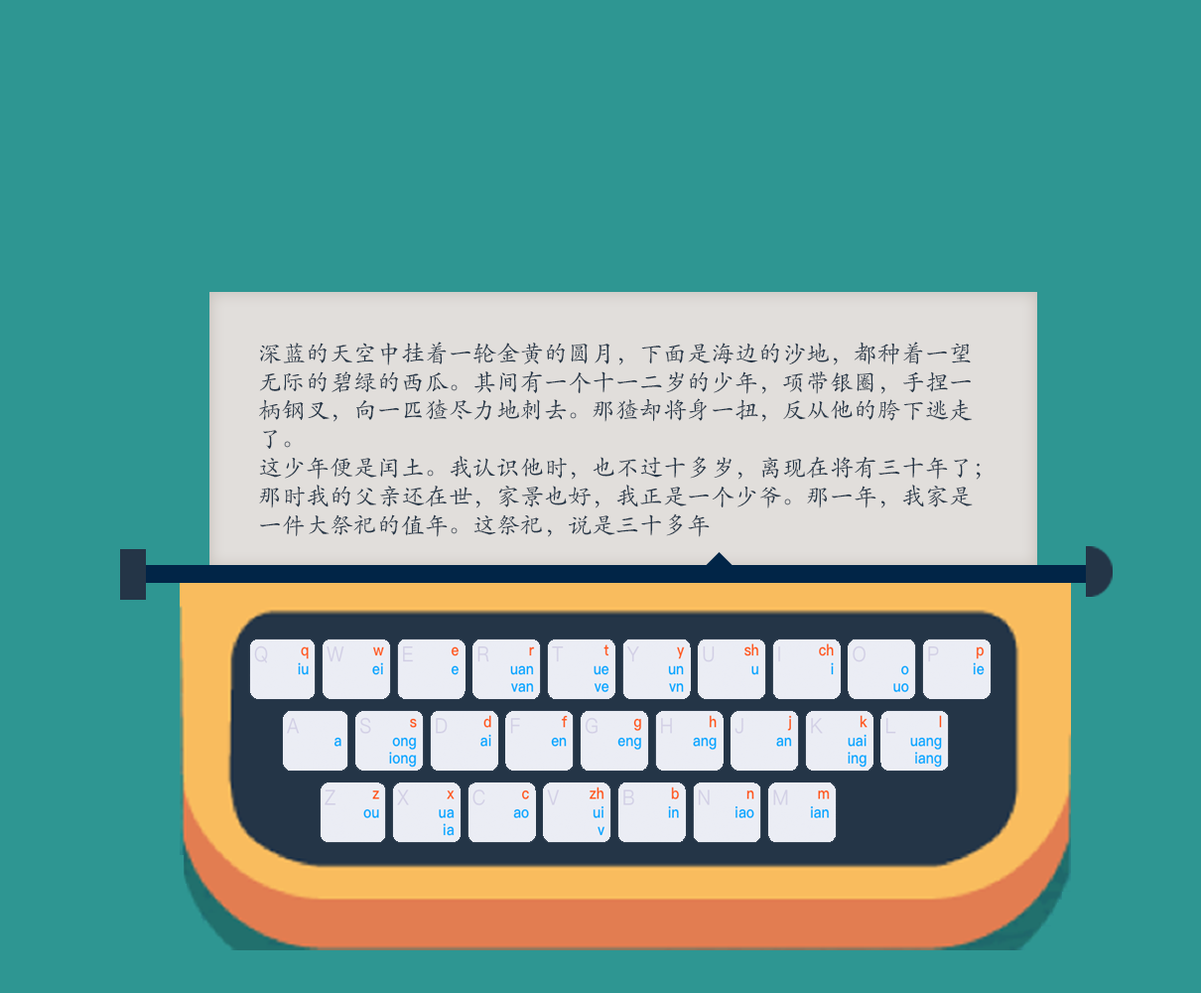
<style>
.page{position:relative;width:1201px;height:993px;background:#2e9692}
.page>*{position:absolute;margin:0}
.t1{font:23.8px "STKaitiSC-Regular";color:#243547}
</style>
<div class="page">
<p class="t1" style="left:259px;top:341px;width:722px;height:196px">深蓝的天空中挂着一轮金黄的圆月，下面是海边的沙地，都种着一望<br>无际的碧绿的西瓜。其间有一个十一二岁的少年，项带银圈，手捏一<br>柄钢叉，向一匹猹尽力地刺去。那猹却将身一扭，反从他的胯下逃走<br>了。<br>这少年便是闰土。我认识他时，也不过十多岁，离现在将有三十年了；<br>那时我的父亲还在世，家景也好，我正是一个少爷。那一年，我家是<br>一件大祭祀的值年。这祭祀，说是三十多年</p>
</div>
